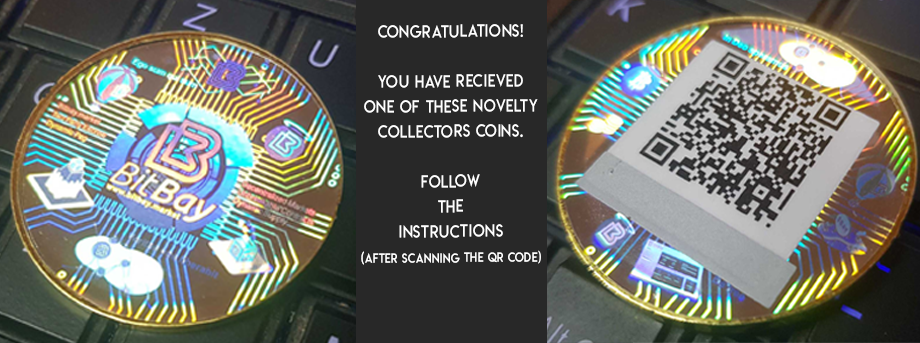
<style>
.page{position:relative;width:920px;height:343px}
.page>*{position:absolute;margin:0}
.t1{font:16.7px/25px "LemonMilklight";letter-spacing:0.06em;color:#ffffff;scale:0.89 1}
.t2{font:12.5px/25px "LemonMilklight";letter-spacing:0.06em;color:#ffffff;scale:0.89 1}
</style>
<div class="page">
<p class="t1" style="left:361px;top:24px;width:180px;height:241px;text-align:center">Congratulations!<br><br>you have recieved<br>one of these novelTy<br>collectors coins.<br><br>follow<br>the<br>InstructionS<br><span class="t2">(AFTER scanning the QR CODE)</span></p>
</div>
